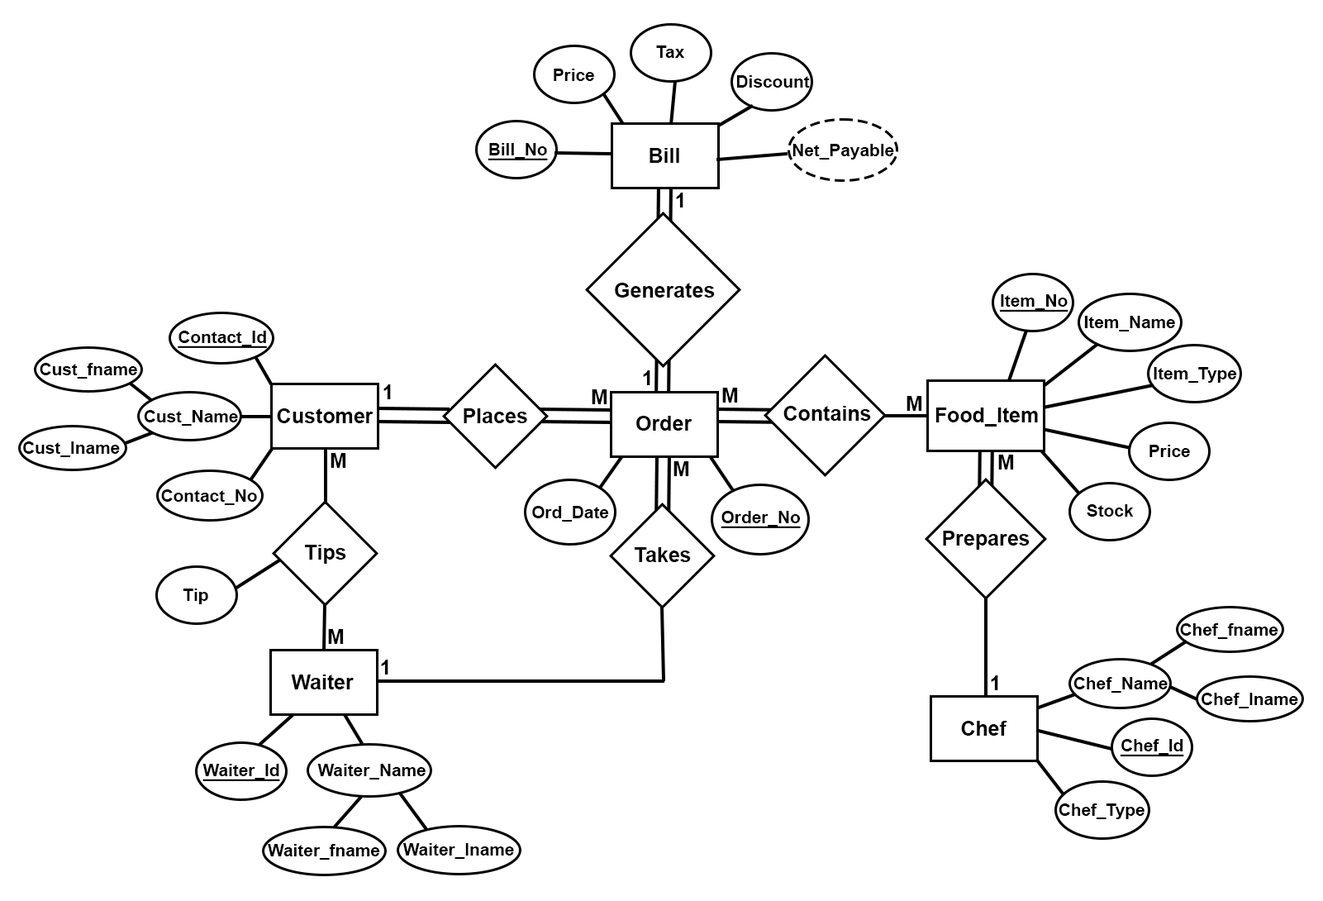
<style>
.page{position:relative;width:1323px;height:901px;background:#ffffff}
.page>*{position:absolute;margin:0}
.t1{font:17.2px "Arial-BoldMT";color:#000000}
.t2{font:17.2px "Arial-BoldMT";color:#000000;text-decoration:underline}
.t3{font:20.7px "Arial-BoldMT";color:#000000}
</style>
<div class="page">
<p class="t1" style="left:656px;top:45px;width:29px;height:13px">Tax</p>
<p class="t1" style="left:554px;top:69px;width:40px;height:12px">Price</p>
<p class="t1" style="left:737px;top:75px;width:73px;height:13px">Discount</p>
<p class="t2" style="left:488px;top:143px;width:60px;height:17px">Bill_No</p>
<p class="t3" style="left:650px;top:148px;width:29px;height:15px">Bill</p>
<p class="t1" style="left:793px;top:144px;width:101px;height:16px">Net_Payable</p>
<p class="t3" style="left:676px;top:193px;width:8px;height:14px">1</p>
<p class="t3" style="left:615px;top:283px;width:100px;height:15px">Generates</p>
<p class="t2" style="left:1000px;top:294px;width:69px;height:18px">Item_No</p>
<p class="t1" style="left:1085px;top:316px;width:90px;height:15px">Item_Name</p>
<p class="t2" style="left:178px;top:331px;width:89px;height:17px">Contact_Id</p>
<p class="t1" style="left:40px;top:363px;width:97px;height:16px">Cust_fname</p>
<p class="t3" style="left:643px;top:370px;width:8px;height:15px">1</p>
<p class="t1" style="left:1154px;top:367px;width:83px;height:16px">Item_Type</p>
<p class="t3" style="left:384px;top:384px;width:7px;height:15px">1</p>
<p class="t3" style="left:592px;top:389px;width:16px;height:15px">M</p>
<p class="t3" style="left:722px;top:388px;width:16px;height:15px">M</p>
<p class="t3" style="left:907px;top:396px;width:16px;height:15px">M</p>
<p class="t1" style="left:144px;top:410px;width:94px;height:16px">Cust_Name</p>
<p class="t3" style="left:277px;top:408px;width:97px;height:15px">Customer</p>
<p class="t3" style="left:464px;top:408px;width:63px;height:15px">Places</p>
<p class="t3" style="left:784px;top:406px;width:87px;height:15px">Contains</p>
<p class="t3" style="left:936px;top:408px;width:102px;height:19px">Food_Item</p>
<p class="t3" style="left:637px;top:416px;width:56px;height:15px">Order</p>
<p class="t1" style="left:23px;top:441px;width:97px;height:16px">Cust_lname</p>
<p class="t1" style="left:1150px;top:445px;width:40px;height:12px">Price</p>
<p class="t3" style="left:331px;top:453px;width:15px;height:15px">M</p>
<p class="t3" style="left:674px;top:461px;width:15px;height:15px">M</p>
<p class="t3" style="left:999px;top:455px;width:15px;height:15px">M</p>
<p class="t1" style="left:161px;top:489px;width:96px;height:16px">Contact_No</p>
<p class="t1" style="left:532px;top:506px;width:77px;height:16px">Ord_Date</p>
<p class="t1" style="left:1087px;top:504px;width:47px;height:13px">Stock</p>
<p class="t2" style="left:721px;top:511px;width:80px;height:17px">Order_No</p>
<p class="t3" style="left:943px;top:531px;width:87px;height:19px">Prepares</p>
<p class="t3" style="left:305px;top:545px;width:41px;height:19px">Tips</p>
<p class="t3" style="left:635px;top:547px;width:56px;height:15px">Takes</p>
<p class="t1" style="left:183px;top:589px;width:25px;height:15px">Tip</p>
<p class="t3" style="left:328px;top:629px;width:16px;height:15px">M</p>
<p class="t1" style="left:1180px;top:623px;width:99px;height:16px">Chef_fname</p>
<p class="t3" style="left:381px;top:660px;width:8px;height:15px">1</p>
<p class="t3" style="left:291px;top:675px;width:63px;height:14px">Waiter</p>
<p class="t3" style="left:991px;top:675px;width:8px;height:15px">1</p>
<p class="t1" style="left:1074px;top:677px;width:94px;height:16px">Chef_Name</p>
<p class="t1" style="left:1202px;top:693px;width:97px;height:15px">Chef_lname</p>
<p class="t3" style="left:961px;top:721px;width:47px;height:15px">Chef</p>
<p class="t2" style="left:1120px;top:739px;width:65px;height:18px">Chef_Id</p>
<p class="t2" style="left:203px;top:764px;width:77px;height:17px">Waiter_Id</p>
<p class="t1" style="left:317px;top:764px;width:109px;height:16px">Waiter_Name</p>
<p class="t1" style="left:1059px;top:803px;width:86px;height:16px">Chef_Type</p>
<p class="t1" style="left:268px;top:844px;width:112px;height:16px">Waiter_fname</p>
<p class="t1" style="left:403px;top:843px;width:111px;height:16px">Waiter_lname</p>
</div>
